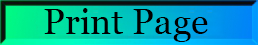
<style>
.page{position:relative;width:258px;height:45px}
.page>*{position:absolute;margin:0}
.t1{font:36px "Georgia";color:#000000}
</style>
<div class="page">
<p class="t1" style="left:44px;top:8px;width:164px;height:34px">Print Page</p>
</div>
